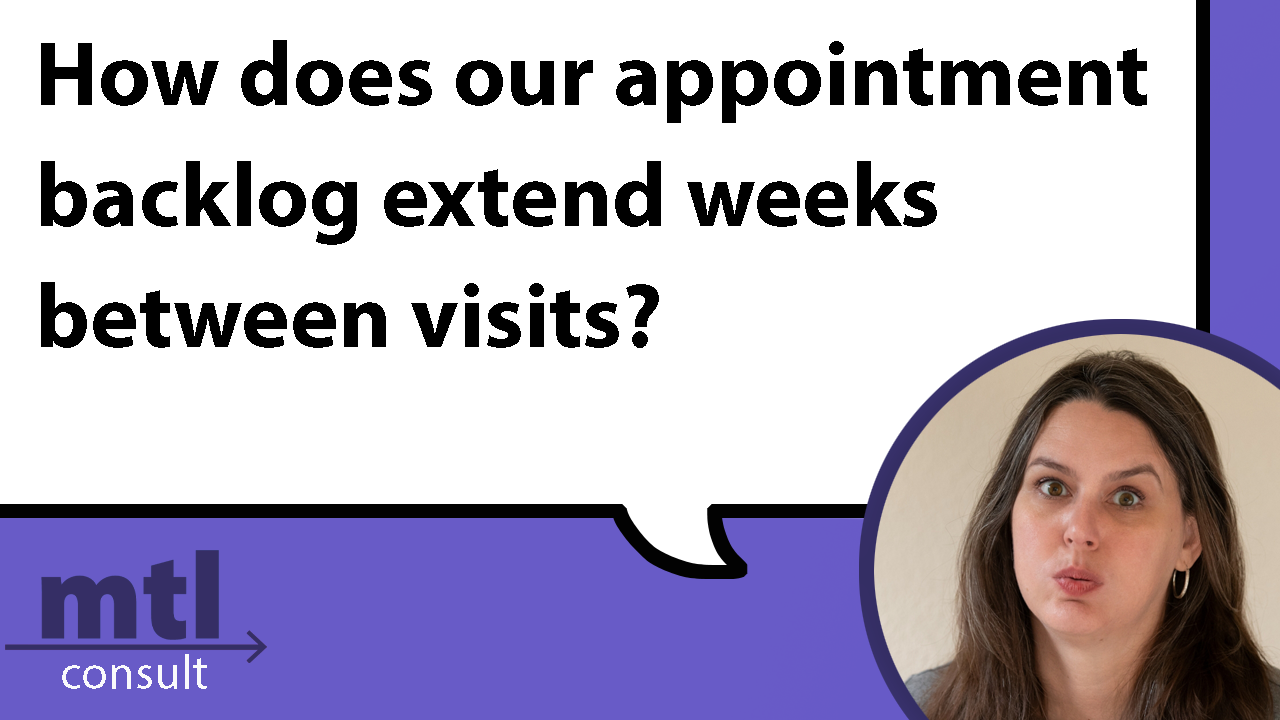
<style>
.page{position:relative;width:1280px;height:720px;background:#ffffff}
.page>*{position:absolute;margin:0}
.t1{font:91.7px "MyriadPro-Bold";color:#000000}
</style>
<div class="page">
<p class="t1" style="left:41px;top:40px;width:1106px;height:308px">How does our appointment<br>backlog extend weeks<br>between visits?</p>
</div>
